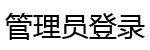
<style>
.page{position:relative;width:150px;height:50px;background:#ffffff}
.page>*{position:absolute;margin:0}
.t1{font:28px "MicrosoftYaHei";color:#030303}
</style>
<div class="page">
<p class="t1" style="left:5px;top:13px;width:140px;height:27px">管理员登录</p>
</div>
